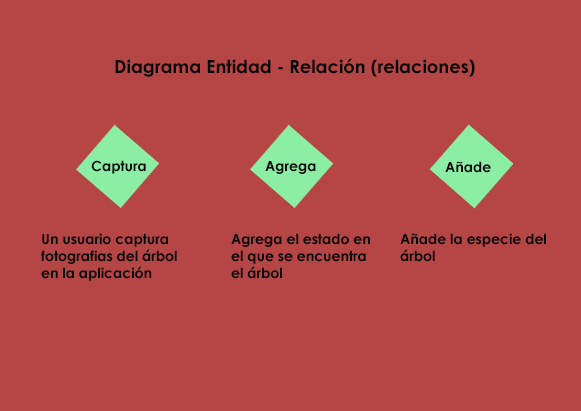
<style>
.page{position:relative;width:581px;height:411px;background:#b64646}
.page>*{position:absolute;margin:0}
.t1{font:18px "CenturyGothic-Bold";color:#080808}
.t2{font:14px "CenturyGothic-Bold";color:#080808}
</style>
<div class="page">
<p class="t1" style="left:115px;top:58px;width:360px;height:19px">Diagrama Entidad - Relación (relaciones)</p>
<p class="t2" style="left:91px;top:160px;width:55px;height:14px">Captura</p>
<p class="t2" style="left:265px;top:161px;width:51px;height:13px">Agrega</p>
<p class="t2" style="left:445px;top:161px;width:46px;height:12px">Añade</p>
<p class="t2" style="left:41px;top:233px;width:136px;height:48px">Un usuario captura fotografias del árbol en la aplicación</p>
<p class="t2" style="left:231px;top:233px;width:139px;height:46px">Agrega el estado en el que se encuentra el árbol</p>
<p class="t2" style="left:400px;top:233px;width:146px;height:29px">Añade la especie del árbol</p>
</div>
